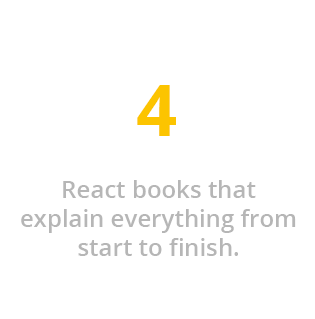
<style>
.page{position:relative;width:315px;height:319px;background:#ffffff}
.page>*{position:absolute;margin:0}
.t1{font:72px "OpenSans-Bold";color:#fcc400}
.t2{font:24px "OpenSans-Semibold";color:#b6b6b6}
</style>
<div class="page">
<p class="t1" style="left:137px;top:85px;width:39px;height:51px">4</p>
<p class="t2" style="left:21px;top:180px;width:275px;height:76px;text-align:center">React books that <br>explain everything from start to finish.</p>
</div>
